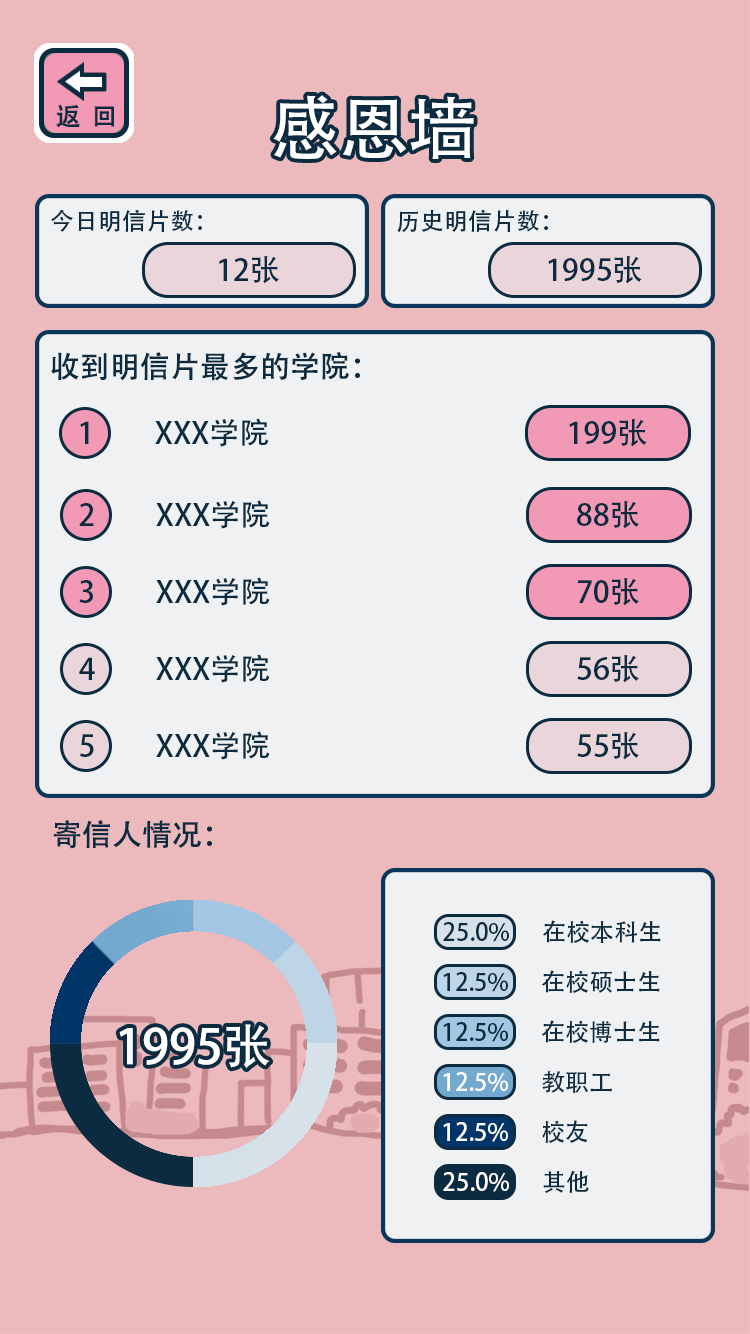
<style>
.page{position:relative;width:750px;height:1334px;background:#ecb9bc}
.page>*{position:absolute;margin:0}
.t1{font:69px "AdobeHeitiStd-Regular";color:#ffffff}
.t2{font:24px "AdobeHeitiStd-Regular";color:#0b2b40}
.t3{font:30px "AdobeHeitiStd-Regular";color:#0b2b40}
.t4{font:48px "AdobeHeitiStd-Regular";color:#ffffff}
.t5{font:24px "AdobeHeitiStd-Regular";color:#ffffff}
</style>
<div class="page">
<p class="t1" style="left:273px;top:95px;width:201px;height:64px">感恩墙</p>
<p class="t2" style="left:51px;top:209px;width:151px;height:23px">今日明信片数：</p>
<p class="t2" style="left:397px;top:209px;width:151px;height:24px">历史明信片数：</p>
<p class="t3" style="left:219px;top:256px;width:60px;height:28px">12张</p>
<p class="t3" style="left:548px;top:256px;width:94px;height:28px">1995张</p>
<p class="t3" style="left:51px;top:352px;width:309px;height:29px">收到明信片最多的学院：</p>
<p class="t3" style="left:80px;top:421px;width:9px;height:23px">1</p>
<p class="t3" style="left:155px;top:418px;width:114px;height:29px">XXX学院</p>
<p class="t3" style="left:569px;top:419px;width:78px;height:28px">199张</p>
<p class="t3" style="left:79px;top:503px;width:15px;height:23px">2</p>
<p class="t3" style="left:156px;top:500px;width:114px;height:29px">XXX学院</p>
<p class="t3" style="left:577px;top:501px;width:62px;height:28px">88张</p>
<p class="t3" style="left:79px;top:580px;width:14px;height:23px">3</p>
<p class="t3" style="left:156px;top:577px;width:114px;height:29px">XXX学院</p>
<p class="t3" style="left:578px;top:578px;width:61px;height:28px">70张</p>
<p class="t3" style="left:156px;top:654px;width:114px;height:29px">XXX学院</p>
<p class="t3" style="left:79px;top:657px;width:16px;height:23px">4</p>
<p class="t3" style="left:577px;top:655px;width:62px;height:28px">56张</p>
<p class="t3" style="left:80px;top:734px;width:14px;height:23px">5</p>
<p class="t3" style="left:156px;top:731px;width:114px;height:29px">XXX学院</p>
<p class="t3" style="left:577px;top:732px;width:62px;height:28px">55张</p>
<p class="t3" style="left:53px;top:820px;width:159px;height:29px">寄信人情况：</p>
<p class="t2" style="left:443px;top:920px;width:218px;height:23px">25.0%      在校本科生</p>
<p class="t2" style="left:443px;top:970px;width:217px;height:23px">12.5%      在校硕士生</p>
<p class="t4" style="left:119px;top:1024px;width:151px;height:45px">1995张</p>
<p class="t2" style="left:443px;top:1020px;width:217px;height:23px">12.5%      在校博士生</p>
<p class="t5" style="left:443px;top:1071px;width:169px;height:22px">12.5%<span class="t2">      教职工</span></p>
</div>
